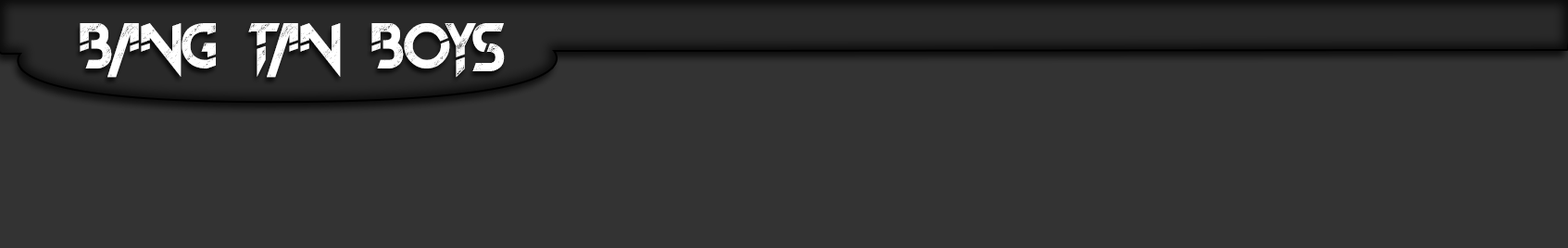
<style>
.page{position:relative;width:1568px;height:248px;background:#333333}
.page>*{position:absolute;margin:0}
.t1{font:65.9px "TheFrontMan2demo";color:#ffffff}
</style>
<div class="page">
<p class="t1" style="left:80px;top:23px;width:425px;height:55px">BANG TAN BOYS</p>
</div>
